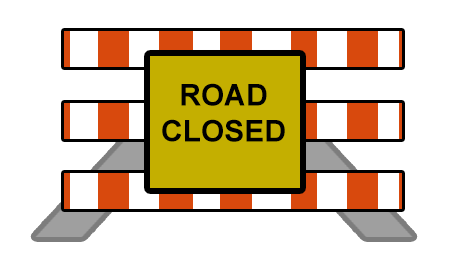
<style>
.page{position:relative;width:455px;height:276px;background:#ffffff}
.page>*{position:absolute;margin:0}
.t1{font:30px "Arial-BoldMT";color:#000000}
</style>
<div class="page">
<p class="t1" style="left:162px;top:83px;width:123px;height:59px;text-align:center">ROAD<br>CLOSED</p>
</div>
